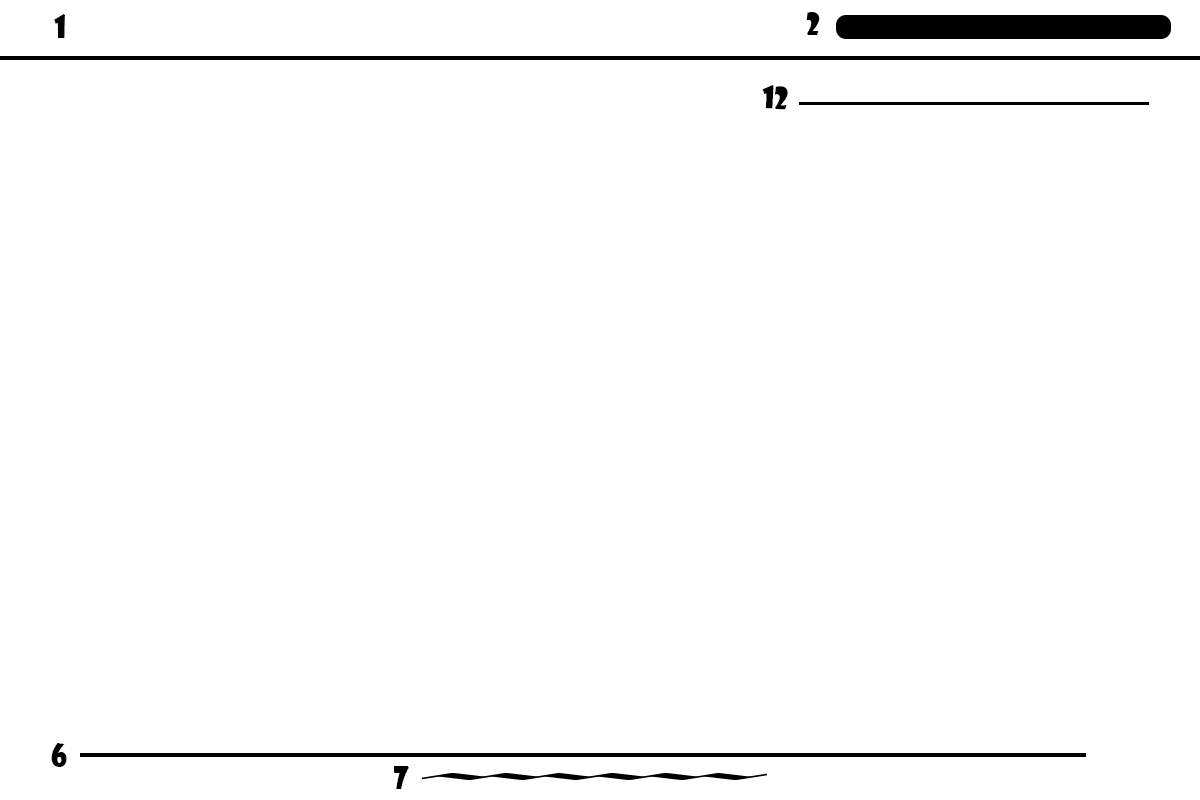
<style>
.page{position:relative;width:1200px;height:800px;background:#ffffff}
.page>*{position:absolute;margin:0}
.t1{font:30px "ShowcardGothic-Reg";color:#000000}
</style>
<div class="page">
<p class="t1" style="left:54px;top:14px;width:11px;height:24px">1</p>
<p class="t1" style="left:806px;top:12px;width:14px;height:23px">2</p>
<p class="t1" style="left:762px;top:85px;width:26px;height:25px;rotate:2deg">12</p>
<p class="t1" style="left:51px;top:743px;width:16px;height:24px">6</p>
<p class="t1" style="left:393px;top:766px;width:16px;height:24px">7</p>
</div>
